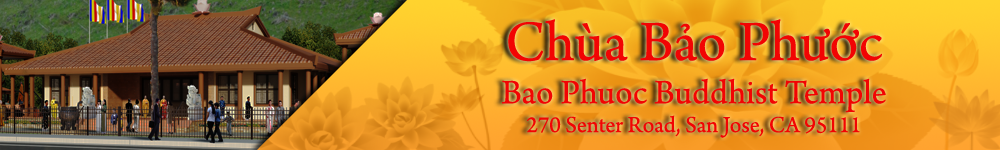
<style>
.page{position:relative;width:1000px;height:150px}
.page>*{position:absolute;margin:0}
.t1{font:24px "ArnoPro-Regular";color:#f20403}
.t2{font:60px "ArnoPro-Regular";color:#f20403}
.t3{font:36px "ArnoPro-Regular";color:#f20403}
</style>
<div class="page">
<p class="t1" style="left:501px;top:19px;width:385px;height:119px;text-align:center"><span class="t2">Chùa Bảo Phước<br></span><span class="t3">Bao Phuoc Buddhist Temple<br></span>270 Senter Road, San Jose, CA 95111</p>
</div>
